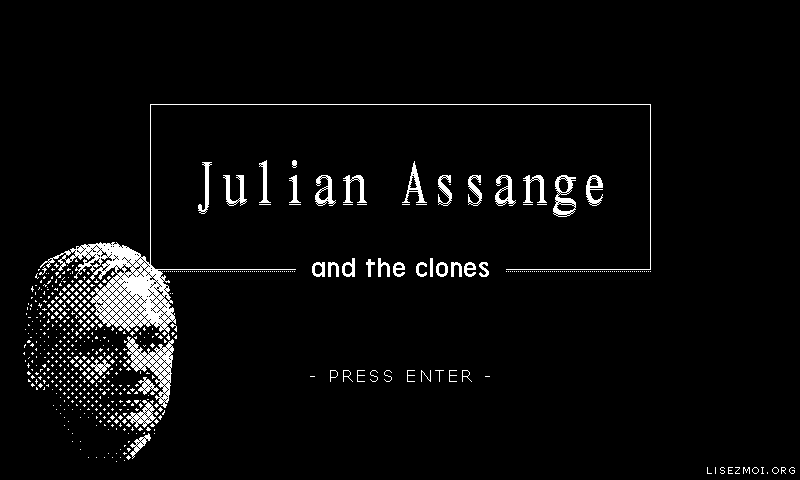
<style>
.page{position:relative;width:800px;height:480px;background:#000000}
.page>*{position:absolute;margin:0}
.t1{font:60px "JCsmPC";color:#ffffff}
.t2{font:31px "Terminal-Grotesque";color:#ffffff}
.t3{font:16px "Verdana";letter-spacing:0.2em;color:#ffffff}
</style>
<div class="page">
<p class="t1" style="left:198px;top:161px;width:405px;height:55px">Julian Assange</p>
<p class="t1" style="left:198px;top:160px;width:405px;height:55px">Julian Assange</p>
<p class="t1" style="left:198px;top:162px;width:405px;height:55px">Julian Assange</p>
<p class="t2" style="left:312px;top:258px;width:177px;height:19px">and the clones</p>
<p class="t3" style="left:310px;top:370px;width:180px;height:12px">- PRESS ENTER -</p>
</div>
